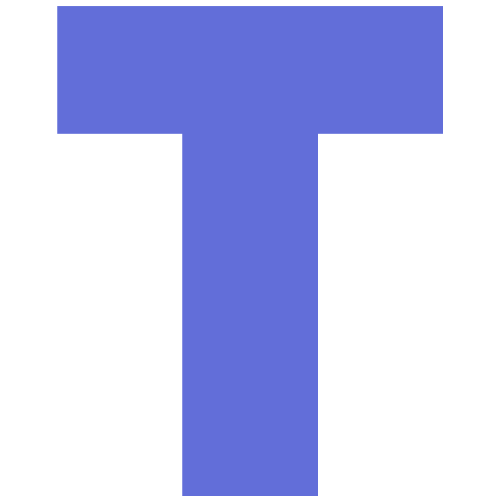
<style>
.page{position:relative;width:500px;height:500px;background:#ffffff}
.page>*{position:absolute;margin:0}
.t1{font:710.3px "FONTSPRINGDEMO-LufgaBlackRegular";color:#626ed9}
</style>
<div class="page">
<p class="t1" style="left:57px;top:6px;width:386px;height:490px">T</p>
</div>
